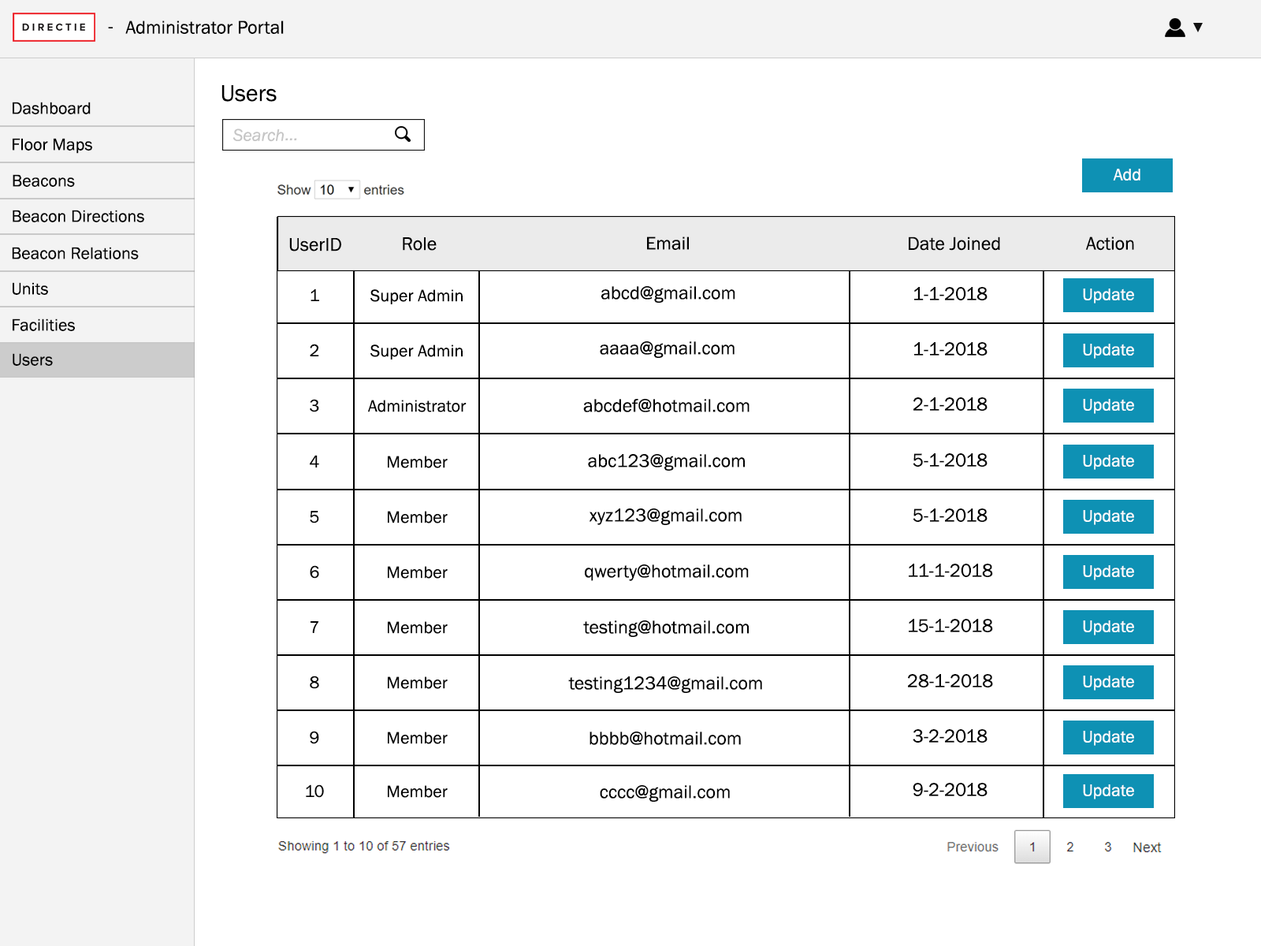
<style>
.page{position:relative;width:1261px;height:946px;background:#ffffff}
.page>*{position:absolute;margin:0}
.t1{font:18.9px "FranklinGothic-Book";color:#000000}
.t2{font:23.6px "FranklinGothic-Book";color:#000000}
.t3{font:17.3px "FranklinGothic-Book";color:#000000}
.t4{font:17.3px "FranklinGothic-Book";color:#ffffff}
</style>
<div class="page">
<p class="t1" style="left:108px;top:27px;width:5px;height:1px">-</p>
<p class="t1" style="left:125px;top:20px;width:159px;height:14px">Administrator Portal</p>
<p class="t2" style="left:221px;top:85px;width:56px;height:17px">Users</p>
<p class="t3" style="left:13px;top:102px;width:78px;height:12px">Dashboard</p>
<p class="t3" style="left:13px;top:138px;width:79px;height:16px">Floor Maps</p>
<p class="t4" style="left:1113px;top:169px;width:27px;height:11px">Add</p>
<p class="t3" style="left:13px;top:174px;width:62px;height:13px">Beacons</p>
<p class="t3" style="left:13px;top:210px;width:131px;height:12px">Beacon Directions</p>
<p class="t1" style="left:289px;top:238px;width:52px;height:13px">UserID</p>
<p class="t1" style="left:403px;top:237px;width:34px;height:14px">Role</p>
<p class="t1" style="left:647px;top:236px;width:42px;height:14px">Email</p>
<p class="t1" style="left:909px;top:236px;width:91px;height:15px">Date Joined</p>
<p class="t1" style="left:1085px;top:236px;width:49px;height:15px">Action</p>
<p class="t3" style="left:12px;top:247px;width:127px;height:12px">Beacon Relations</p>
<p class="t3" style="left:13px;top:282px;width:35px;height:13px">Units</p>
<p class="t3" style="left:311px;top:288px;width:8px;height:13px">1</p>
<p class="t3" style="left:370px;top:289px;width:93px;height:15px">Super Admin</p>
<p class="t1" style="left:601px;top:286px;width:134px;height:17px">abcd@gmail.com</p>
<p class="t1" style="left:914px;top:287px;width:73px;height:13px">1-1-2018</p>
<p class="t4" style="left:1083px;top:288px;width:51px;height:15px">Update</p>
<p class="t3" style="left:13px;top:318px;width:62px;height:13px">Facilities</p>
<p class="t1" style="left:600px;top:341px;width:134px;height:17px">aaaa@gmail.com</p>
<p class="t3" style="left:13px;top:353px;width:40px;height:13px">Users</p>
<p class="t3" style="left:310px;top:344px;width:9px;height:12px">2</p>
<p class="t3" style="left:370px;top:344px;width:93px;height:15px">Super Admin</p>
<p class="t1" style="left:914px;top:342px;width:73px;height:13px">1-1-2018</p>
<p class="t4" style="left:1083px;top:344px;width:51px;height:15px">Update</p>
<p class="t3" style="left:310px;top:399px;width:9px;height:13px">3</p>
<p class="t3" style="left:368px;top:400px;width:99px;height:12px">Administrator</p>
<p class="t1" style="left:583px;top:399px;width:166px;height:13px">abcdef@hotmail.com</p>
<p class="t1" style="left:913px;top:397px;width:74px;height:14px">2-1-2018</p>
<p class="t4" style="left:1083px;top:399px;width:51px;height:15px">Update</p>
<p class="t3" style="left:310px;top:455px;width:9px;height:12px">4</p>
<p class="t3" style="left:388px;top:456px;width:60px;height:12px">Member</p>
<p class="t1" style="left:588px;top:454px;width:157px;height:16px">abc123@gmail.com</p>
<p class="t1" style="left:913px;top:453px;width:74px;height:14px">5-1-2018</p>
<p class="t4" style="left:1083px;top:455px;width:51px;height:15px">Update</p>
<p class="t1" style="left:589px;top:508px;width:153px;height:17px">xyz123@gmail.com</p>
<p class="t1" style="left:913px;top:508px;width:74px;height:14px">5-1-2018</p>
<p class="t4" style="left:1083px;top:510px;width:51px;height:15px">Update</p>
<p class="t3" style="left:310px;top:511px;width:9px;height:12px">5</p>
<p class="t3" style="left:388px;top:511px;width:60px;height:12px">Member</p>
<p class="t3" style="left:310px;top:565px;width:9px;height:13px">6</p>
<p class="t3" style="left:388px;top:566px;width:60px;height:12px">Member</p>
<p class="t1" style="left:585px;top:564px;width:164px;height:17px">qwerty@hotmail.com</p>
<p class="t1" style="left:909px;top:563px;width:84px;height:14px">11-1-2018</p>
<p class="t4" style="left:1083px;top:565px;width:51px;height:15px">Update</p>
<p class="t3" style="left:311px;top:621px;width:7px;height:12px">7</p>
<p class="t3" style="left:388px;top:621px;width:60px;height:13px">Member</p>
<p class="t1" style="left:583px;top:620px;width:166px;height:17px">testing@hotmail.com</p>
<p class="t1" style="left:909px;top:619px;width:84px;height:13px">15-1-2018</p>
<p class="t4" style="left:1083px;top:620px;width:51px;height:15px">Update</p>
<p class="t3" style="left:310px;top:675px;width:9px;height:14px">8</p>
<p class="t3" style="left:388px;top:676px;width:60px;height:13px">Member</p>
<p class="t1" style="left:568px;top:676px;width:194px;height:17px">testing1234@gmail.com</p>
<p class="t1" style="left:908px;top:674px;width:85px;height:13px">28-1-2018</p>
<p class="t4" style="left:1083px;top:675px;width:51px;height:15px">Update</p>
<p class="t3" style="left:310px;top:731px;width:9px;height:13px">9</p>
<p class="t3" style="left:388px;top:731px;width:60px;height:13px">Member</p>
<p class="t1" style="left:589px;top:731px;width:152px;height:14px">bbbb@hotmail.com</p>
<p class="t1" style="left:913px;top:729px;width:74px;height:13px">3-2-2018</p>
<p class="t4" style="left:1083px;top:731px;width:51px;height:15px">Update</p>
<p class="t3" style="left:306px;top:784px;width:18px;height:14px">10</p>
<p class="t3" style="left:388px;top:785px;width:60px;height:13px">Member</p>
<p class="t1" style="left:600px;top:785px;width:130px;height:16px">cccc@gmail.com</p>
<p class="t1" style="left:913px;top:783px;width:74px;height:13px">9-2-2018</p>
<p class="t4" style="left:1083px;top:784px;width:51px;height:15px">Update</p>
</div>
